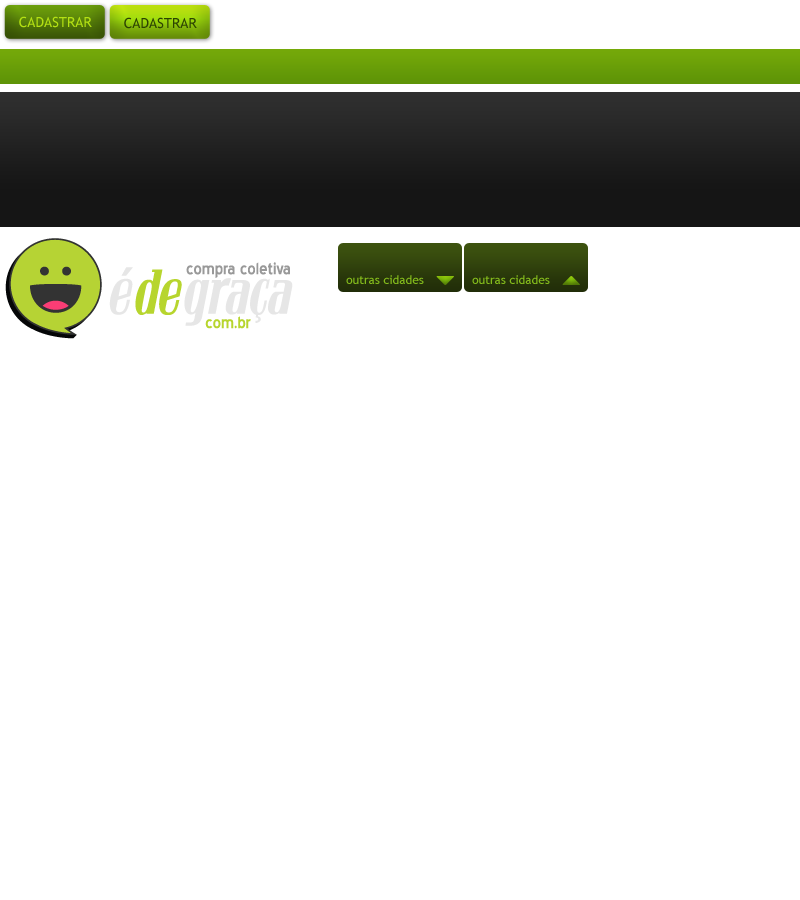
<style>
.page{position:relative;width:800px;height:900px;background:#ffffff}
.page>*{position:absolute;margin:0}
.t1{font:14px "TrebuchetMS";color:#b4e113}
.t2{font:14px "TrebuchetMS";color:#2c4302}
.t3{font:12px "TrebuchetMS";color:#83ba1b}
</style>
<div class="page">
<p class="t1" style="left:19px;top:16px;width:73px;height:12px">CADASTRAR</p>
<p class="t2" style="left:124px;top:17px;width:73px;height:12px">CADASTRAR</p>
<p class="t3" style="left:346px;top:275px;width:78px;height:9px">outras cidades</p>
<p class="t3" style="left:472px;top:275px;width:78px;height:9px">outras cidades</p>
</div>
